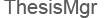
<style>
.page{position:relative;width:106px;height:18px;background:#ffffff}
.page>*{position:absolute;margin:0}
.t1{font:20px "ArialMT";color:#5b5b5b}
</style>
<div class="page">
<p class="t1" style="left:4px;top:0px;width:94px;height:18px">ThesisMgr</p>
</div>
